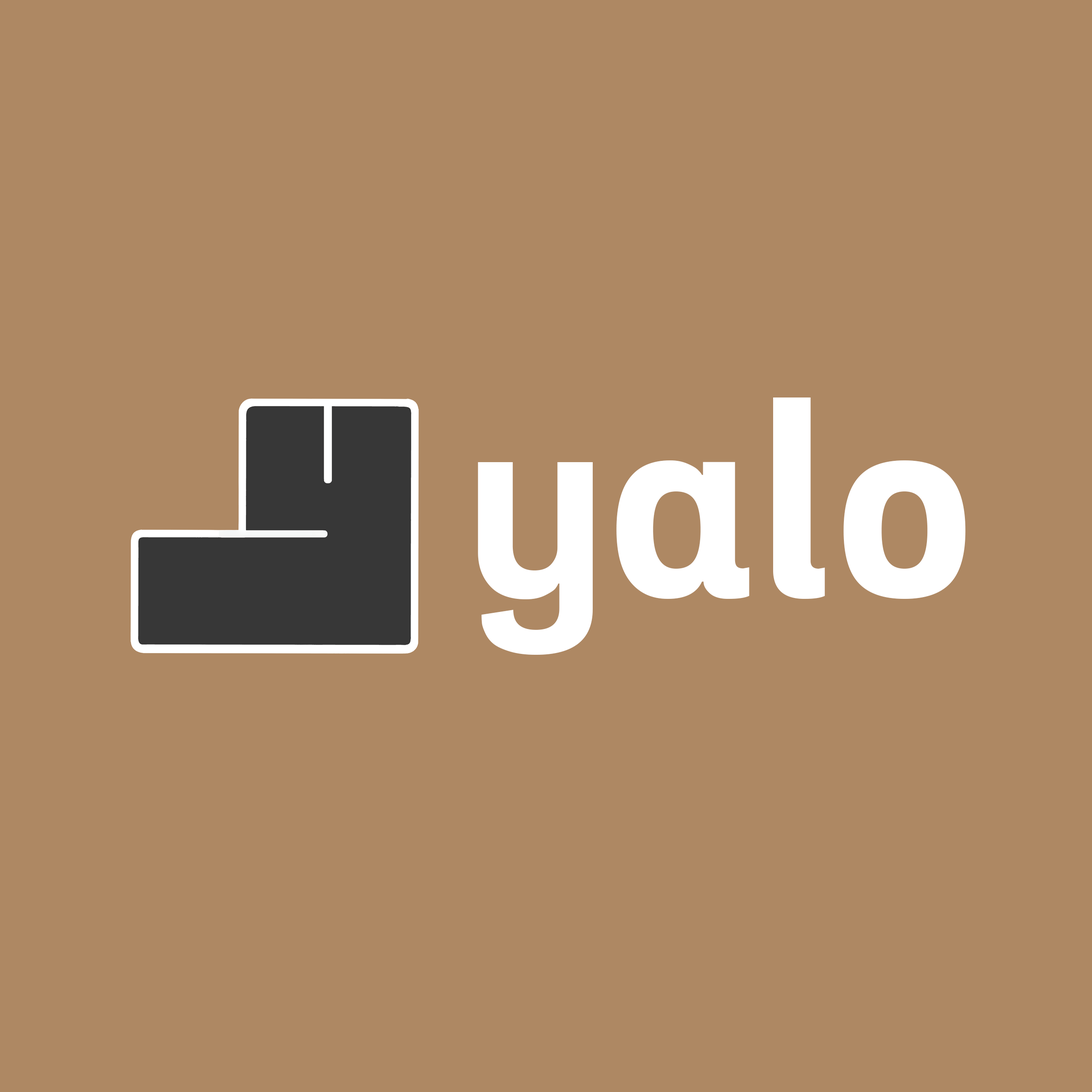
<style>
.page{position:relative;width:1092px;height:1092px;background:#ae8863}
.page>*{position:absolute;margin:0}
.t1{font:273px "GrotaSansAltBold_40648";letter-spacing:0.02em;color:#ffffff}
</style>
<div class="page">
<p class="t1" style="left:478px;top:397px;width:488px;height:258px">yalo</p>
</div>
